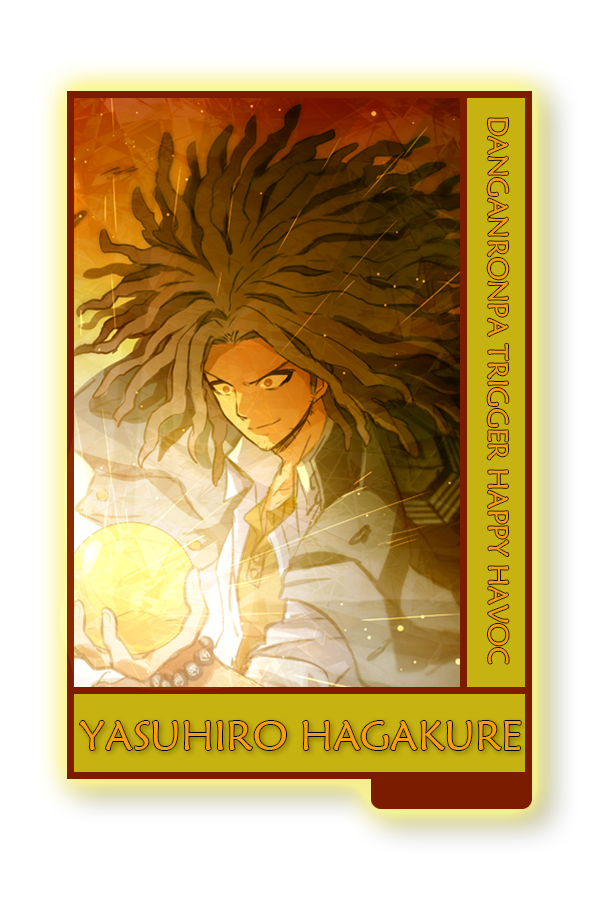
<style>
.page{position:relative;width:600px;height:900px;background:#ffffff}
.page>*{position:absolute;margin:0}
.t1{font:27.9px "MaiandraGD-Regular";color:#f59d14}
.t2{font:41.3px "MaiandraGD-Regular";color:#f59d14}
</style>
<div class="page">
<p class="t1" style="left:487px;top:118px;width:22px;height:546px;rotate:90deg">DANGANRONPA TRIGGER HAPPY HAVOC</p>
<p class="t2" style="left:79px;top:721px;width:442px;height:29px">YASUHIRO HAGAKURE</p>
</div>
